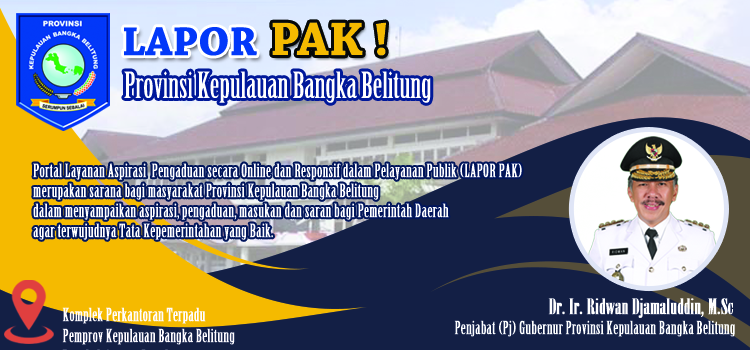
<style>
.page{position:relative;width:750px;height:350px;background:#131f45}
.page>*{position:absolute;margin:0}
.t1{font:42.3px "ChaparralPro-Bold";color:#0238f9}
.t2{font:49.4px "ChaparralPro-Bold";color:#f5ba00}
.t3{font:35.3px "BirchStd";color:#ffffff}
.t4{font:18px/20px "BirchStd";color:#ffffff;font-weight:bold}
.t5{font:21.2px "BodoniMTPosterCompressed";color:#feffff;font-weight:bold}
.t6{font:17.6px "BirchStd";color:#feffff;font-weight:bold}
</style>
<div class="page">
<p class="t1" style="left:124px;top:27px;width:133px;height:29px">LAPOR</p>
<p class="t2" style="left:272px;top:22px;width:114px;height:34px">PAK !</p>
<p class="t3" style="left:124px;top:71px;width:307px;height:32px">Provinsi Kepulauan Bangka Belitung</p>
<p class="t4" style="left:33px;top:163px;width:489px;height:77px">Portal Layanan Aspirasi  Pengaduan secara Online dan Responsif dalam Pelayanan Publik (LAPOR PAK)  <br>merupakan sarana bagi masyarakat Provinsi Kepulauan Bangka Belitung <br>dalam menyampaikan aspirasi, pengaduan, masukan dan saran bagi Pemerintah Daerah <br>agar terwujudnya Tata Kepemerintahan yang Baik.</p>
<p class="t5" style="left:548px;top:298px;width:185px;height:20px">Dr. Ir. Ridwan Djamaluddin, M.Sc</p>
<p class="t6" style="left:454px;top:320px;width:281px;height:17px">Penjabat (Pj) Gubernur Provinsi Kepulauan Bangka Belitung</p>
</div>
